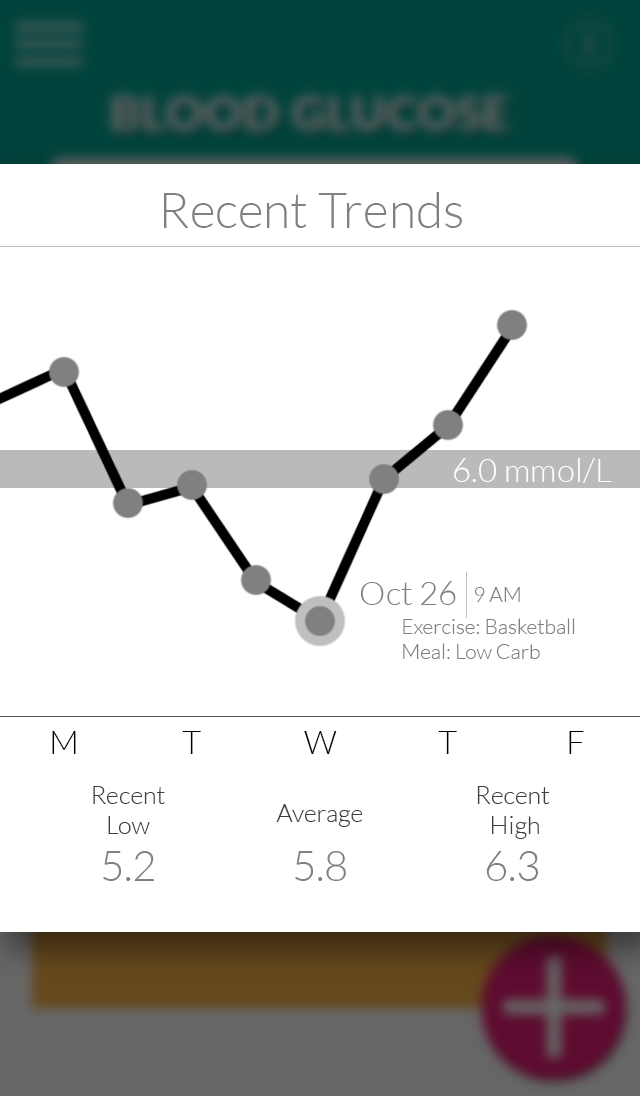
<style>
.page{position:relative;width:640px;height:1096px;background:#ffffff}
.page>*{position:absolute;margin:0}
.t1{font:50px "Lato-Light";color:#808080}
.t2{font:33.3px "Lato-Light";color:#ffffff}
.t3{font:33.3px "Lato-Light";color:#808080}
.t4{font:20.8px "Lato-Light";color:#808080}
.t5{font:33.3px "Lato-Light";color:#000000}
.t6{font:25px "Lato-Light";color:#404040}
.t7{font:41.7px "Lato-Light";color:#808080}
</style>
<div class="page">
<p class="t1" style="left:164px;top:192px;width:298px;height:36px">Recent Trends</p>
<p class="t2" style="left:454px;top:458px;width:158px;height:25px">6.0 mmol/L</p>
<p class="t3" style="left:360px;top:581px;width:96px;height:24px">Oct 26</p>
<p class="t4" style="left:474px;top:587px;width:46px;height:15px">9 AM</p>
<p class="t4" style="left:403px;top:618px;width:172px;height:41px">Exercise: Basketball<br>Meal: Low Carb</p>
<p class="t5" style="left:52px;top:731px;width:24px;height:23px">M</p>
<p class="t5" style="left:182px;top:731px;width:19px;height:23px">T</p>
<p class="t5" style="left:304px;top:731px;width:33px;height:23px">W</p>
<p class="t5" style="left:438px;top:731px;width:19px;height:23px">T</p>
<p class="t5" style="left:569px;top:731px;width:15px;height:23px">F</p>
<p class="t6" style="left:93px;top:786px;width:72px;height:48px;text-align:center">Recent<br>Low</p>
<p class="t6" style="left:477px;top:786px;width:73px;height:53px;text-align:center">Recent <br>High</p>
<p class="t6" style="left:276px;top:804px;width:87px;height:23px">Average</p>
<p class="t7" style="left:103px;top:851px;width:51px;height:30px">5.2</p>
<p class="t7" style="left:295px;top:851px;width:51px;height:30px">5.8</p>
<p class="t7" style="left:486px;top:851px;width:53px;height:30px">6.3</p>
</div>
